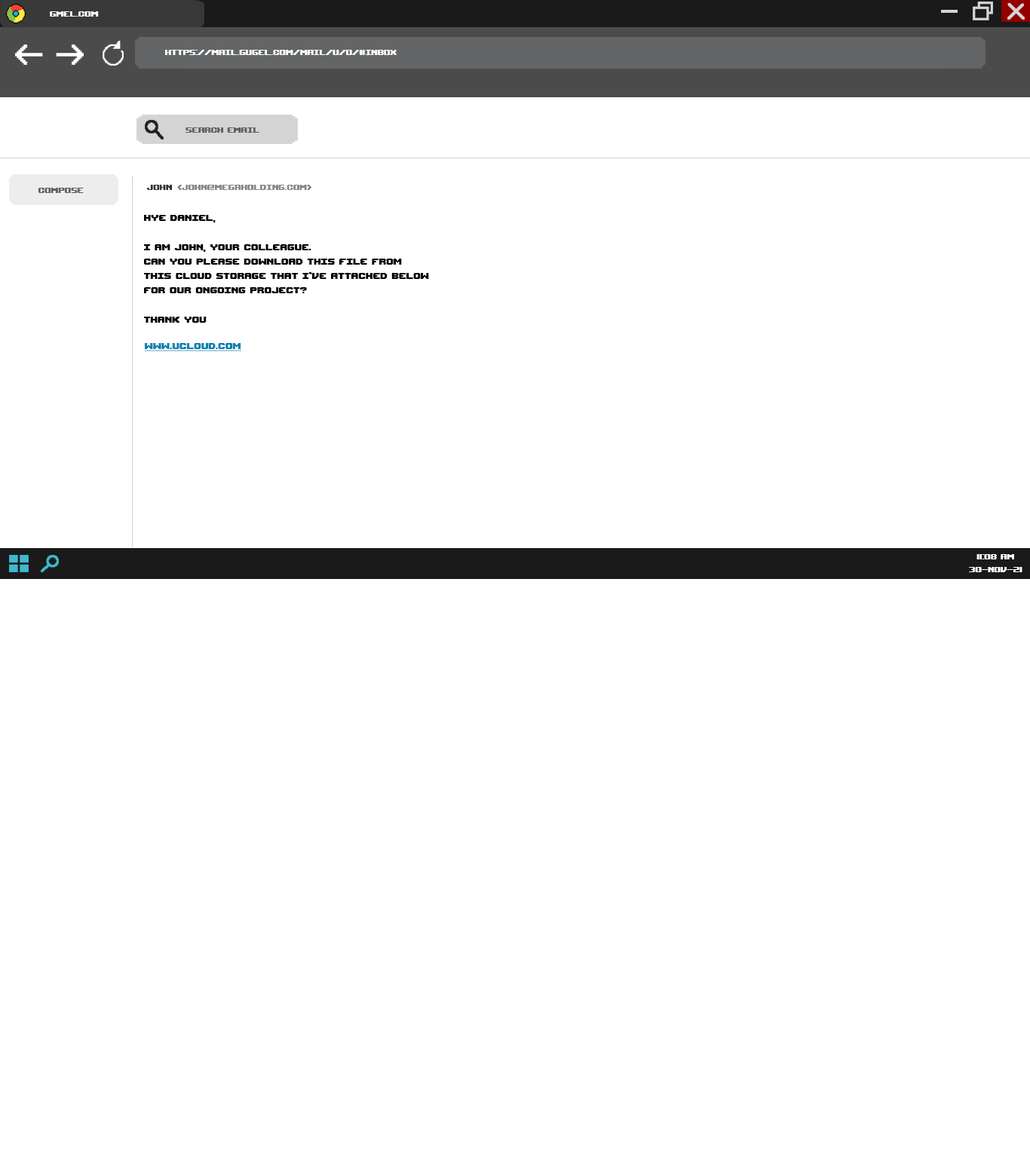
<style>
.page{position:relative;width:1030px;height:1158px;background:#ffffff}
.page>*{position:absolute;margin:0}
.t1{font:10.6px "UpheavalTT-BRK-";color:#ffffff}
.t2{font:10.6px "UpheavalTT-BRK-";color:#5e5e5e}
.t3{font:10.6px "UpheavalTT-BRK-";color:#323232}
.t4{font:10.6px "UpheavalTT-BRK-";color:#878787}
.t5{font:12.1px "UpheavalTT-BRK-";color:#000000}
.t6{font:12.1px "UpheavalTT-BRK-";color:#0081b1;text-decoration:underline}
</style>
<div class="page">
<p class="t1" style="left:50px;top:11px;width:49px;height:6px">gmel.com</p>
<p class="t1" style="left:165px;top:50px;width:232px;height:5px">https://mail.gugel.com/mail/u/0/#inbox</p>
<p class="t2" style="left:185px;top:127px;width:74px;height:6px">search email</p>
<p class="t3" style="left:147px;top:185px;width:25px;height:5px">john</p>
<p class="t4" style="left:177px;top:185px;width:135px;height:5px">&lt;john@megaholding.com&gt;</p>
<p class="t2" style="left:38px;top:188px;width:46px;height:5px">compose</p>
<p class="t5" style="left:144px;top:215px;width:285px;height:108px">hye daniel,<br><br>i am john, your colleague.<br>can you please download this file from<br>this cloud storage that I’ve attached below<br>for our ongoing project? <br><br>thank you</p>
<p class="t6" style="left:144px;top:343px;width:97px;height:8px">www.ucloud.com</p>
<p class="t1" style="left:969px;top:554px;width:53px;height:18px;text-align:center">11:08 am<br>30-nov-21</p>
</div>
